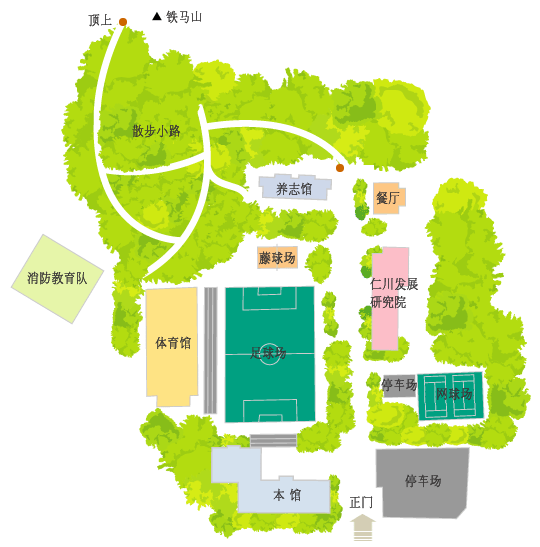
<style>
.page{position:relative;width:540px;height:547px;background:#ffffff}
.page>*{position:absolute;margin:0}
.t1{font:14px "Haansoft-Batang";color:#383636;font-weight:bold;scale:0.85 1}
.t2{font:14px/18px "Haansoft-Batang";color:#383636;font-weight:bold;scale:0.85 1}
</style>
<div class="page">
<p class="t1" style="left:88px;top:14px;width:24px;height:13px">顶上</p>
<p class="t1" style="left:166px;top:10px;width:36px;height:14px">铁马山</p>
<p class="t1" style="left:132px;top:124px;width:49px;height:14px">散步小路</p>
<p class="t1" style="left:276px;top:182px;width:36px;height:14px">养志馆</p>
<p class="t1" style="left:376px;top:191px;width:24px;height:14px">餐厅</p>
<p class="t1" style="left:259px;top:251px;width:36px;height:14px">藤球场</p>
<p class="t1" style="left:27px;top:271px;width:60px;height:14px">消防教育队</p>
<p class="t2" style="left:370px;top:277px;width:48px;height:32px">仁川发展<br>研究院</p>
<p class="t1" style="left:155px;top:336px;width:36px;height:14px">体育馆</p>
<p class="t1" style="left:250px;top:346px;width:36px;height:14px">足球场</p>
<p class="t1" style="left:381px;top:378px;width:36px;height:14px">停车场</p>
<p class="t1" style="left:437px;top:387px;width:35px;height:14px">网球场</p>
<p class="t1" style="left:405px;top:474px;width:36px;height:14px">停车场</p>
<p class="t1" style="left:273px;top:488px;width:28px;height:14px">本 馆</p>
<p class="t1" style="left:349px;top:496px;width:24px;height:13px">正门</p>
</div>
